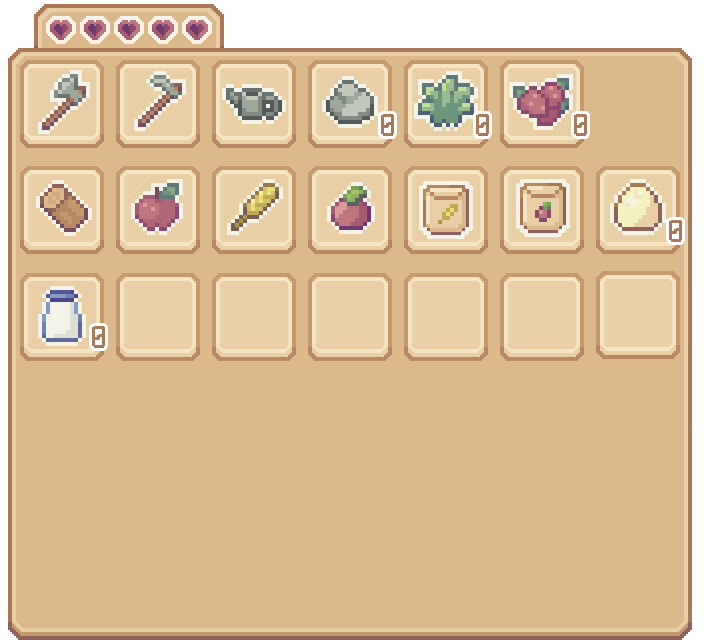
<style>
.page{position:relative;width:704px;height:640px;background:#dcb98a}
.page>*{position:absolute;margin:0}
.t1{font:28.5px "pixelFont-7-8x14-sproutLands";color:#aa7959;scale:1.05 1}
</style>
<div class="page">
<p class="t1" style="left:381px;top:114px;width:13px;height:22px">0</p>
<p class="t1" style="left:476px;top:114px;width:13px;height:22px">0</p>
<p class="t1" style="left:574px;top:114px;width:13px;height:22px">0</p>
<p class="t1" style="left:669px;top:220px;width:13px;height:22px">0</p>
<p class="t1" style="left:92px;top:326px;width:13px;height:22px">0</p>
</div>
